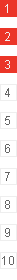
<style>
.page{position:relative;width:17px;height:280px;background:#ffffff}
.page>*{position:absolute;margin:0}
.t1{font:12px/28px "ArialMT";color:#666666}
.t2{font:12px/28px "ArialMT";color:#eeeeee}
</style>
<div class="page">
<p class="t1" style="left:2px;top:4px;width:12px;height:261px;text-align:center"><span class="t2">1<br>2<br>3<br></span>4<br>5<br>6<br>7<br>8<br>9<br>10</p>
</div>
